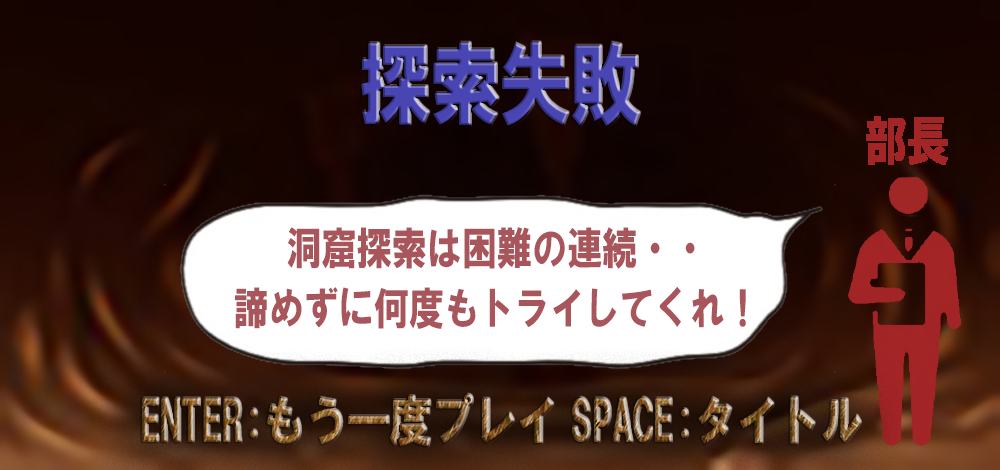
<style>
.page{position:relative;width:1000px;height:470px}
.page>*{position:absolute;margin:0}
.t1{font:90px "HGSoeiKakugothicUB";letter-spacing:-0.025em;color:#4946b3;font-variant:small-caps;scale:0.8 1}
.t2{font:45px/60px "HGSoeiKakugothicUB";letter-spacing:-0.025em;color:#a8565b;font-variant:small-caps;scale:0.8 1}
.t3{font:54px "HGSoeiKakugothicUB";letter-spacing:-0.025em;font-variant:small-caps;scale:0.8 1}
</style>
<div class="page">
<p class="t1" style="left:361px;top:42px;width:279px;height:84px">探索失敗</p>
<p class="t2" style="left:235px;top:227px;width:511px;height:102px;text-align:center">洞窟探索は困難の連続・・<br>諦めずに何度もトライしてくれ！</p>
<p class="t3" style="left:142px;top:394px;width:719px;height:52px">ENTER:もう一度プレイ SPACE:タイトル</p>
</div>
